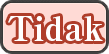
<style>
.page{position:relative;width:109px;height:54px;background:#ffdad5}
.page>*{position:absolute;margin:0}
.t1{font:34px "RyuminPro-ExBold";color:#ffffff}
</style>
<div class="page">
<p class="t1" style="left:8px;top:16px;width:95px;height:25px">Tidak</p>
</div>
